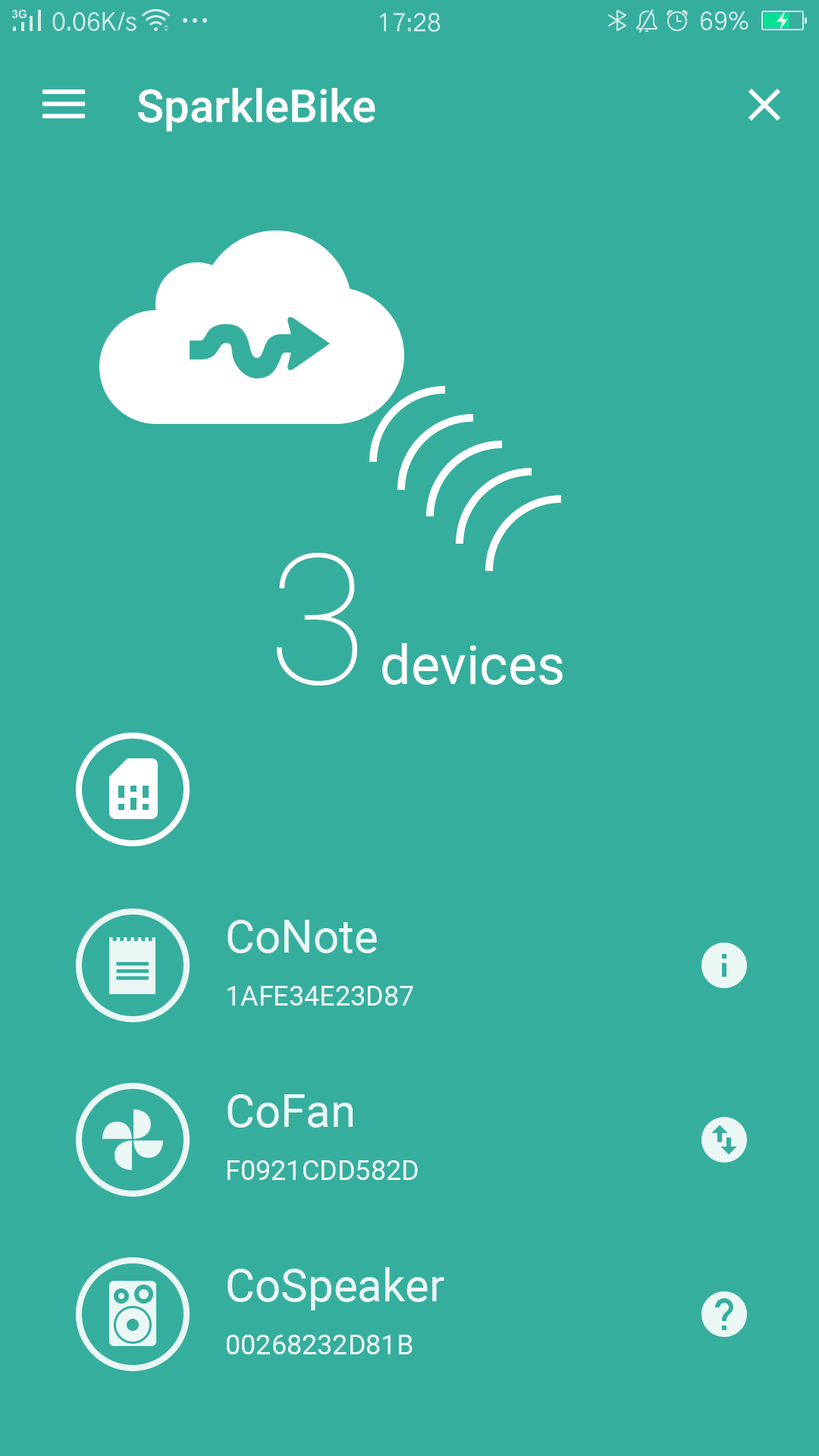
<style>
.page{position:relative;width:819px;height:1456px;background:#36ae9e}
.page>*{position:absolute;margin:0}
.t1{font:54.6px "Roboto-Regular";color:#ffffff}
.t2{font:182px "Roboto-Thin";color:#ffffff}
.t3{font:45.5px "Roboto-Regular";color:#ffffff}
.t4{font:27.3px "Roboto-Regular";color:#ffffff}
</style>
<div class="page">
<p class="t1" style="left:277px;top:553px;width:286px;height:133px"><span class="t2">3 </span>devices</p>
<p class="t3" style="left:227px;top:920px;width:150px;height:33px">CoNote</p>
<p class="t4" style="left:227px;top:986px;width:186px;height:20px">1AFE34E23D87</p>
<p class="t3" style="left:227px;top:1094px;width:126px;height:34px">CoFan</p>
<p class="t4" style="left:227px;top:1160px;width:191px;height:20px">F0921CDD582D</p>
<p class="t3" style="left:227px;top:1267px;width:217px;height:43px">CoSpeaker</p>
<p class="t4" style="left:227px;top:1335px;width:186px;height:19px">00268232D81B</p>
</div>
